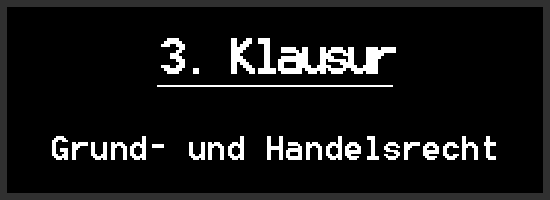
<style>
.page{position:relative;width:550px;height:200px;background:#000000}
.page>*{position:absolute;margin:0}
.t1{font:50px "8514oem";color:#ffffff;text-decoration:underline}
.t2{font:41.7px "8514oem";color:#ffffff}
</style>
<div class="page">
<p class="t1" style="left:157px;top:38px;width:239px;height:49px">3. Klausur</p>
<p class="t2" style="left:52px;top:136px;width:444px;height:24px">Grund- und Handelsrecht</p>
</div>
